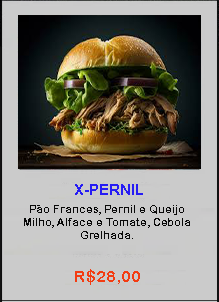
<style>
.page{position:relative;width:219px;height:302px;background:#cbcbcb}
.page>*{position:absolute;margin:0}
.t1{font:14.7px "Arial-BoldMT";color:#261cf4}
.t2{font:10.7px "ArialRoundedMTBold";color:#090909}
.t3{font:16px "ArialRoundedMTBold";color:#f33c12}
</style>
<div class="page">
<p class="t1" style="left:75px;top:184px;width:68px;height:11px">X-PERNIL</p>
<p class="t2" style="left:24px;top:205px;width:166px;height:34px;text-align:center">Pão Frances, Pernil e Queijo Milho, Alface e Tomate, Cebola Grelhada.</p>
<p class="t3" style="left:75px;top:269px;width:65px;height:16px">R$28,00</p>
</div>
